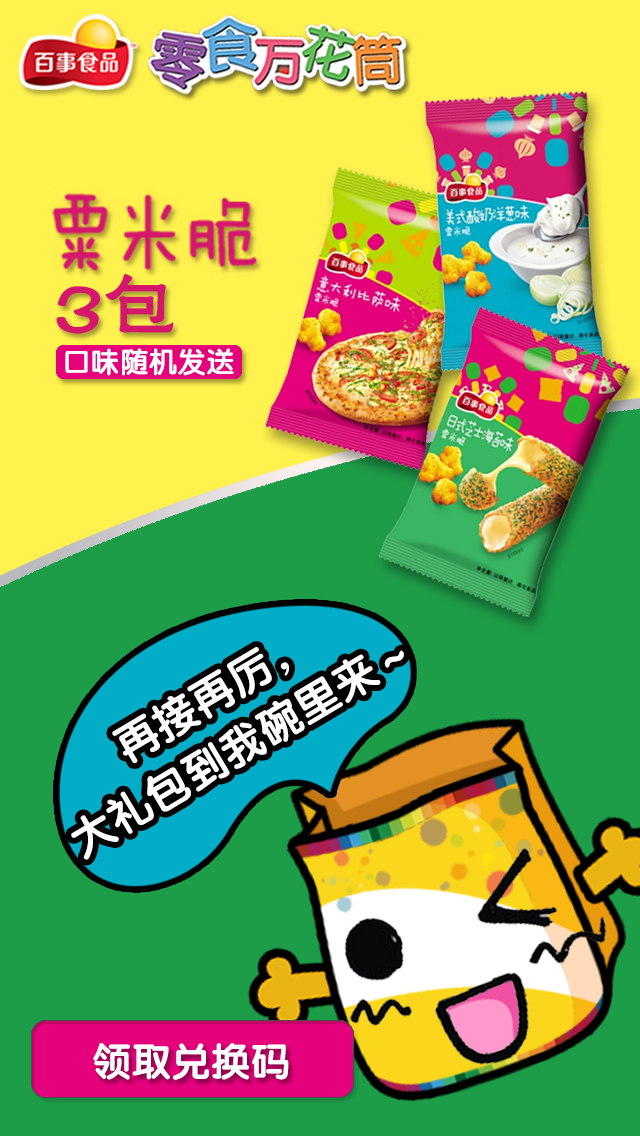
<style>
.page{position:relative;width:640px;height:1136px;background:#1d9d48}
.page>*{position:absolute;margin:0}
.t1{font:75.7px "FZHLJW--GB1-0";color:#e4007f}
.t2{font:28.5px "FZY4JW--GB1-0";color:#ffffff}
.t3{font:43.6px/58.1px "FZY4JW--GB1-0";color:#ffffff}
.t4{font:39.1px "FZY4JW--GB1-0";color:#ffffff}
</style>
<div class="page">
<p class="t1" style="left:56px;top:274px;width:118px;height:60px">3包</p>
<p class="t2" style="left:65px;top:348px;width:169px;height:28px">口味随机发送</p>
<p class="t3" style="left:71px;top:647px;width:333px;height:213px;text-align:center;rotate:-31deg">再接再厉，<br>大礼包到我碗里来～</p>
<p class="t4" style="left:93px;top:1043px;width:196px;height:37px">领取兑换码</p>
</div>
